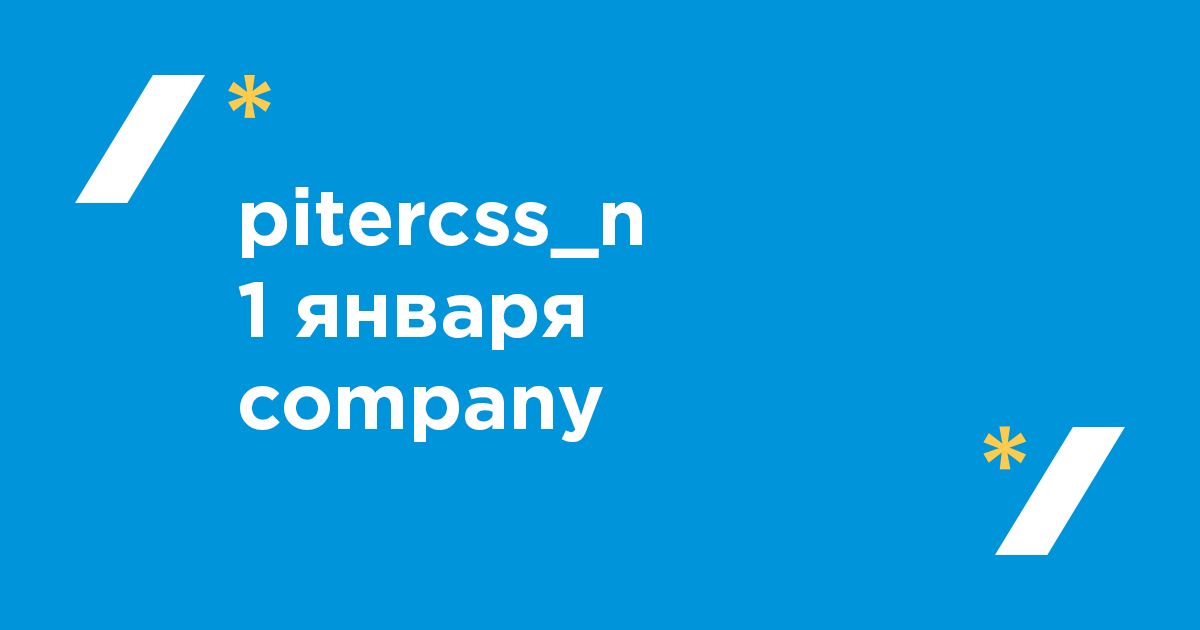
<style>
.page{position:relative;width:1200px;height:630px;background:#0094da}
.page>*{position:absolute;margin:0}
.t1{font:79.1px/92.1px "GothamPro-Bold";color:#ffffff}
</style>
<div class="page">
<p class="t1" style="left:238px;top:187px;width:404px;height:255px">pitercss_n<br>1 января<br>company</p>
</div>
